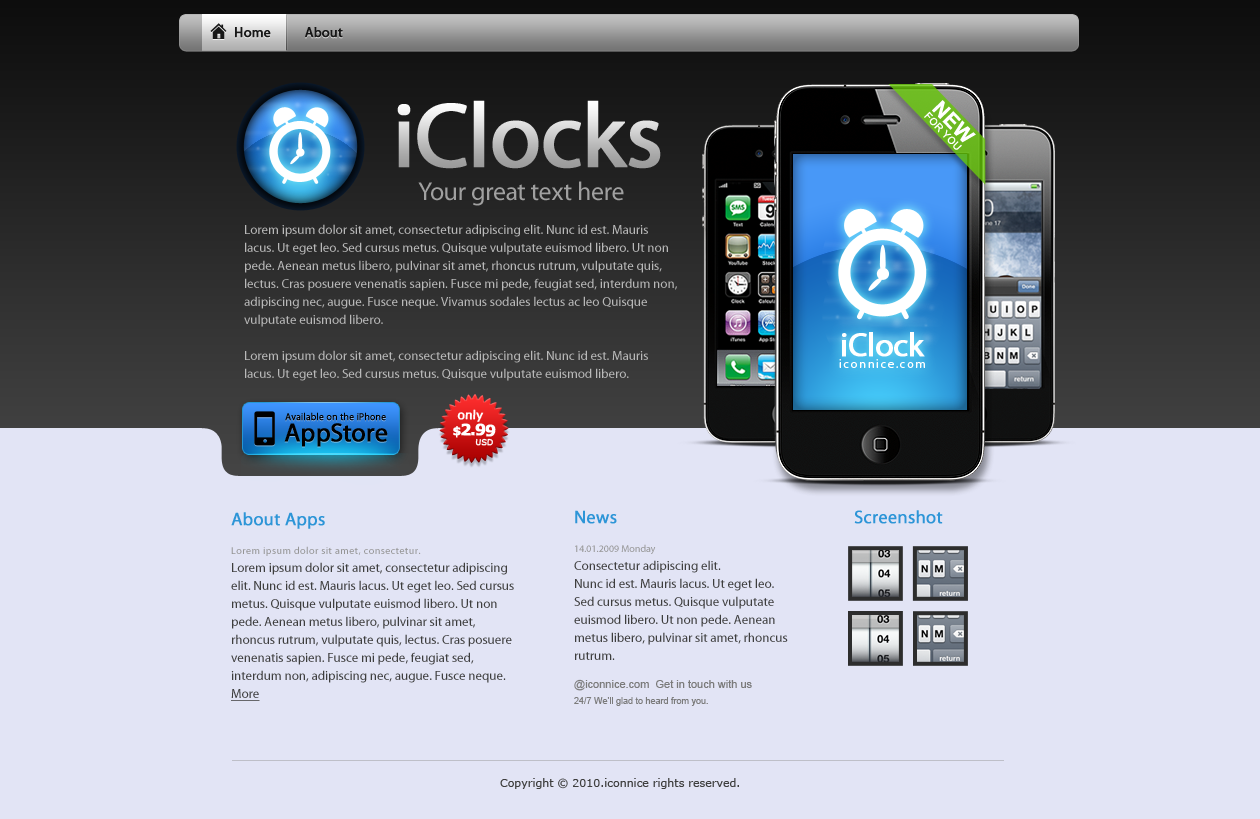
<style>
.page{position:relative;width:1260px;height:819px;background:#e2e4f5}
.page>*{position:absolute;margin:0}
.t1{font:14px "MyriadPro-Regular";color:#171717;font-weight:bold}
.t2{font:92px "MyriadPro-Regular";letter-spacing:-0.025em;font-weight:bold}
.t3{font:10.3px/10.3px "ArialMT";letter-spacing:0.025em;color:#ffffff;text-transform:uppercase}
.t4{font:20.6px/10.3px "Arial-BoldMT";letter-spacing:0.025em;color:#ffffff}
.t5{font:26px "MyriadPro-Regular";letter-spacing:-0.01em;color:#a0a0a0}
.t6{font:13px/18px "MyriadPro-Regular";color:#b9b9b9}
.t7{font:33px "MyriadPro-Regular";letter-spacing:-0.025em;color:#ffffff;font-weight:bold}
.t8{font:12px "MyriadPro-Regular";letter-spacing:0.15em;color:#ffffff}
.t9{font:9.9px "MyriadPro-Regular";letter-spacing:-0.005em;color:#000000;font-weight:bold}
.t10{font:11.9px/15.9px "Verdana";letter-spacing:-0.01em;color:#ffffff;font-weight:bold}
.t11{font:11.9px/15.9px "Verdana-Bold";letter-spacing:-0.1em;color:#ffffff;font-weight:bold}
.t12{font:15.9px/15.9px "Verdana-Bold";letter-spacing:-0.1em;color:#ffffff;font-weight:bold}
.t13{font:7.9px/9.2px "Verdana";letter-spacing:-0.01em;color:#ffffff;font-weight:bold}
.t14{font:25.8px "MyriadPro-Regular";letter-spacing:-0.005em;color:#000000;font-weight:bold}
.t15{font:18px "MyriadPro-Regular";color:#2d95d7;font-weight:bold}
.t16{font:13px/18px "MyriadPro-Regular";color:#3e3e3e}
.t17{font:10px/18px "MyriadPro-Regular";color:#959595}
.t18{font:10px "MyriadPro-Regular";letter-spacing:0.05em;color:#959595}
.t19{font:13px/18px "MyriadPro-Regular";color:#2d2d2d}
.t20{font:13px/18px "MyriadPro-Regular";color:#98763d;text-decoration:underline}
.t21{font:11px/16px "ArialMT";color:#7b7b7b}
.t22{font:9px/16px "ArialMT";color:#7b7b7b}
.t23{font:11px "Verdana";color:#3e3e3e}
</style>
<div class="page">
<p class="t1" style="left:235px;top:27px;width:108px;height:11px">Home          About</p>
<p class="t2" style="left:397px;top:100px;width:264px;height:69px">iClocks</p>
<p class="t3" style="left:924px;top:100px;width:52px;height:50px;rotate:46deg"><span class="t4">NEW <br></span>for you</p>
<p class="t5" style="left:418px;top:181px;width:206px;height:25px">Your great text here</p>
<p class="t6" style="left:244px;top:224px;width:433px;height:157px">Lorem ipsum dolor sit amet, consectetur adipiscing elit. Nunc id est. Mauris lacus. Ut eget leo. Sed cursus metus. Quisque vulputate euismod libero. Ut non pede. Aenean metus libero, pulvinar sit amet, rhoncus rutrum, vulputate quis, lectus. Cras posuere venenatis sapien. Fusce mi pede, feugiat sed, interdum non, adipiscing nec, augue. Fusce neque. Vivamus sodales lectus ac leo Quisque vulputate euismod libero.<br><br>Lorem ipsum dolor sit amet, consectetur adipiscing elit. Nunc id est. Mauris lacus. Ut eget leo. Sed cursus metus. Quisque vulputate euismod libero.</p>
<p class="t7" style="left:842px;top:332px;width:83px;height:25px">iClock</p>
<p class="t8" style="left:839px;top:359px;width:86px;height:9px">iconnice.com</p>
<p class="t9" style="left:285px;top:412px;width:101px;height:9px">Available on the iPhone</p>
<p class="t10" style="left:453px;top:409px;width:43px;height:37px;text-align:center;rotate:2deg">only<br><span class="t11">$</span><span class="t12">2.99<br></span><span class="t13">        USD</span></p>
<p class="t14" style="left:284px;top:423px;width:104px;height:24px">AppStore</p>
<p class="t15" style="left:575px;top:510px;width:42px;height:14px">News</p>
<p class="t15" style="left:854px;top:510px;width:89px;height:14px">Screenshot</p>
<p class="t15" style="left:231px;top:512px;width:94px;height:17px">About Apps</p>
<p class="t16" style="left:574px;top:544px;width:214px;height:116px"><span class="t17">14.01.2009 Monday <br></span>Consectetur adipiscing elit. <br>Nunc id est. Mauris lacus. Ut eget leo. Sed cursus metus. Quisque vulputate euismod libero. Ut non pede. Aenean metus libero, pulvinar sit amet, rhoncus rutrum.</p>
<p class="t18" style="left:231px;top:546px;width:190px;height:10px">Lorem ipsum dolor sit amet, consectetur.</p>
<p class="t19" style="left:231px;top:562px;width:283px;height:139px">Lorem ipsum dolor sit amet, consectetur adipiscing elit. Nunc id est. Mauris lacus. Ut eget leo. Sed cursus metus. Quisque vulputate euismod libero. Ut non pede. Aenean metus libero, pulvinar sit amet, rhoncus rutrum, vulputate quis, lectus. Cras posuere venenatis sapien. Fusce mi pede, feugiat sed, interdum non, adipiscing nec, augue. Fusce neque. <span class="t20">More</span></p>
<p class="t21" style="left:574px;top:679px;width:178px;height:27px">@iconnice.com  Get in touch with us<br><span class="t22">24/7 We’ll glad to heard from you.</span></p>
<p class="t23" style="left:500px;top:778px;width:239px;height:11px">Copyright © 2010.iconnice rights reserved.</p>
</div>
